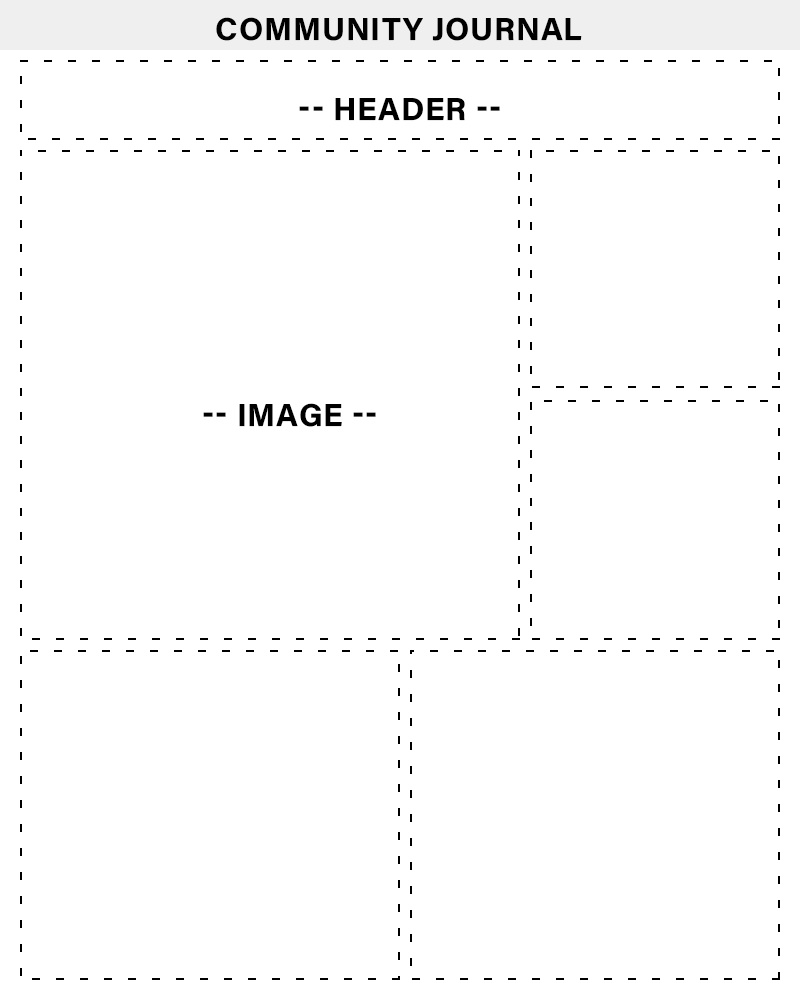
<style>
.page{position:relative;width:800px;height:1000px;background:#ffffff}
.page>*{position:absolute;margin:0}
.t1{font:31.8px "AcuminConcept-Bold";letter-spacing:0.025em;color:#000000;text-transform:uppercase}
</style>
<div class="page">
<p class="t1" style="left:216px;top:17px;width:366px;height:24px">Community Journal</p>
<p class="t1" style="left:299px;top:98px;width:201px;height:23px">-- header --</p>
<p class="t1" style="left:203px;top:403px;width:173px;height:24px">-- IMAGE --</p>
</div>
